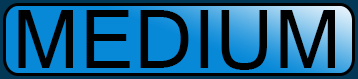
<style>
.page{position:relative;width:358px;height:79px;background:#000000}
.page>*{position:absolute;margin:0}
.t1{font:90px "Raavi";color:#000000}
</style>
<div class="page">
<p class="t1" style="left:18px;top:10px;width:317px;height:60px">MEDIUM</p>
</div>
